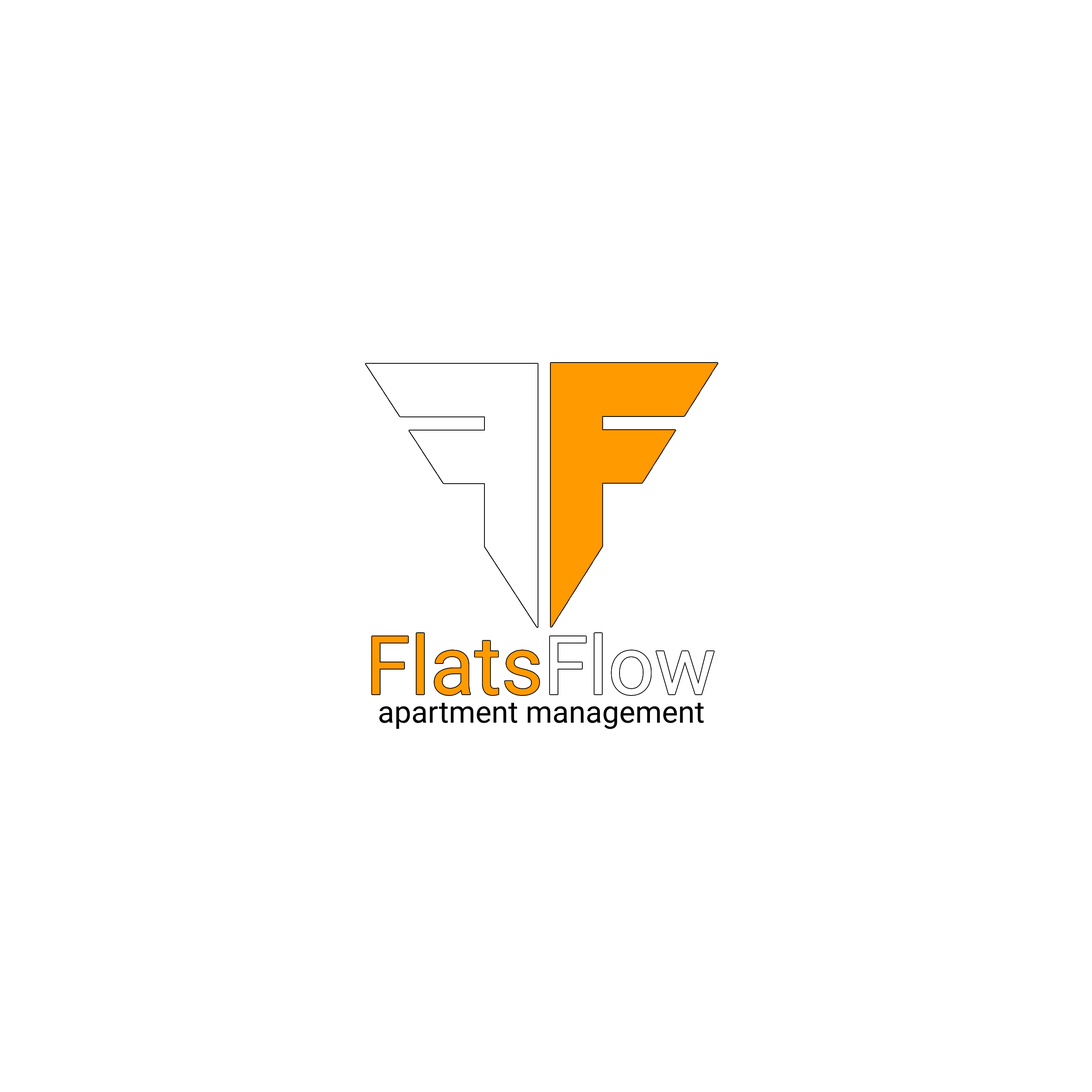
<style>
.page{position:relative;width:1092px;height:1092px;background:#ffffff}
.page>*{position:absolute;margin:0}
.t1{font:81.5px "Roboto-Regular";color:#ff9a00}
.t2{font:81.5px "Roboto-Regular";color:#ffffff}
.t3{font:30.4px "Roboto-Regular";color:#000000}
</style>
<div class="page">
<p class="t1" style="left:372px;top:633px;width:342px;height:62px">Flats<span class="t2">Flow</span></p>
<p class="t3" style="left:379px;top:703px;width:325px;height:26px">apartment management</p>
</div>
